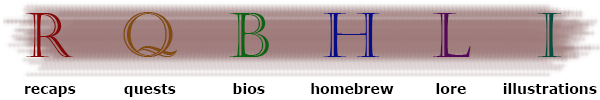
<style>
.page{position:relative;width:600px;height:100px;background:#ffffff}
.page>*{position:absolute;margin:0}
.t1{font:62px "Castellar";color:#850606}
.t2{font:62px "Castellar";color:#824b0f}
.t3{font:62px "Castellar";color:#0a6414}
.t4{font:62px "Castellar";color:#070d85}
.t5{font:62px "Castellar";color:#550758}
.t6{font:62px "Castellar";color:#054d3f}
.t7{font:14px "Verdana-Bold";color:#000000}
</style>
<div class="page">
<p class="t1" style="left:26px;top:13px;width:47px;height:44px">R</p>
<p class="t2" style="left:123px;top:12px;width:55px;height:45px">Q</p>
<p class="t3" style="left:229px;top:13px;width:40px;height:44px">B</p>
<p class="t4" style="left:323px;top:13px;width:57px;height:44px">H</p>
<p class="t5" style="left:432px;top:13px;width:39px;height:44px">L</p>
<p class="t6" style="left:537px;top:13px;width:25px;height:44px">I</p>
<p class="t7" style="left:25px;top:86px;width:51px;height:11px">recaps</p>
<p class="t7" style="left:124px;top:84px;width:52px;height:13px">quests</p>
<p class="t7" style="left:233px;top:83px;width:32px;height:11px">bios</p>
<p class="t7" style="left:311px;top:83px;width:83px;height:11px">homebrew</p>
<p class="t7" style="left:436px;top:83px;width:30px;height:11px">lore</p>
<p class="t7" style="left:503px;top:83px;width:94px;height:11px">illustrations</p>
</div>
